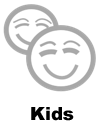
<style>
.page{position:relative;width:100px;height:130px;background:#ffffff}
.page>*{position:absolute;margin:0}
.t1{font:17.9px "Arial-Black";color:#000000}
</style>
<div class="page">
<p class="t1" style="left:31px;top:107px;width:43px;height:14px">Kids</p>
</div>
